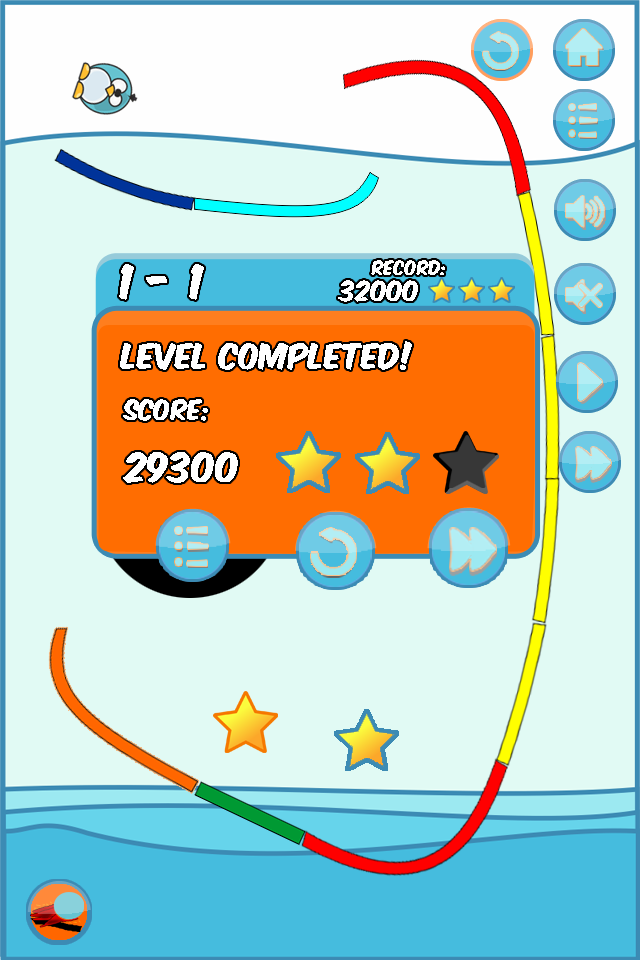
<style>
.page{position:relative;width:640px;height:960px;background:#e1faf4}
.page>*{position:absolute;margin:0}
.t1{font:41px "KomikaAxis";color:#ffffff}
.t2{font:17px "KomikaAxis";color:#ffffff}
.t3{font:24px "KomikaAxis";color:#ffffff}
.t4{font:30px "KomikaAxis";color:#ffffff}
.t5{font:35px "KomikaAxis";color:#ffffff}
</style>
<div class="page">
<p class="t1" style="left:119px;top:264px;width:85px;height:36px">1 - 1</p>
<p class="t2" style="left:371px;top:260px;width:74px;height:15px">Record:</p>
<p class="t3" style="left:338px;top:280px;width:80px;height:22px">32000</p>
<p class="t4" style="left:120px;top:341px;width:292px;height:29px">Level completed!</p>
<p class="t3" style="left:123px;top:399px;width:85px;height:22px">Score:</p>
<p class="t5" style="left:123px;top:452px;width:115px;height:31px">29300</p>
</div>
